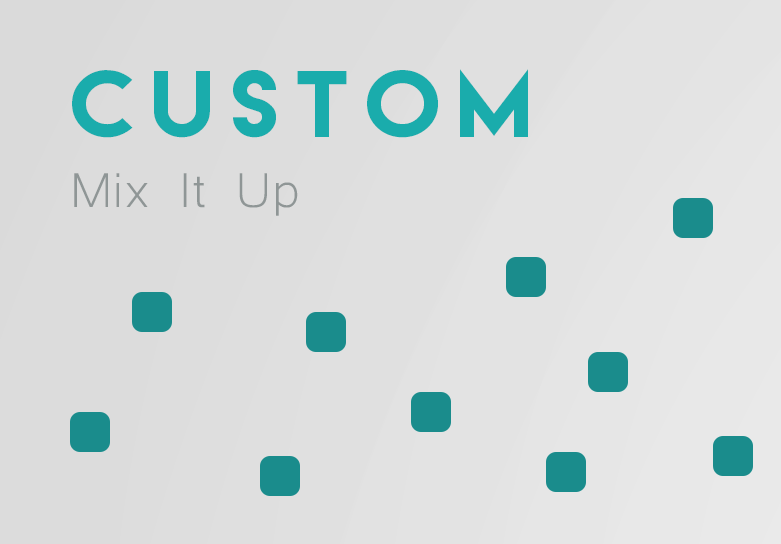
<style>
.page{position:relative;width:781px;height:544px}
.page>*{position:absolute;margin:0}
.t1{font:84.5px "LemonMilk";letter-spacing:0.181em;color:#1aacac;scale:1.06 1}
.t2{font:63.4px "Microsoft-Yi-Baiti";color:#8f9696;scale:1.06 1}
</style>
<div class="page">
<p class="t1" style="left:72px;top:69px;width:456px;height:69px">custom</p>
<p class="t2" style="left:74px;top:173px;width:224px;height:43px">Mix It Up</p>
</div>
